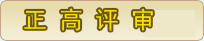
<style>
.page{position:relative;width:204px;height:41px}
.page>*{position:absolute;margin:0}
.t1{font:24px "SimHei";color:#f5e000}
</style>
<div class="page">
<p class="t1" style="left:24px;top:8px;width:129px;height:23px">正 高 评 审</p>
</div>
